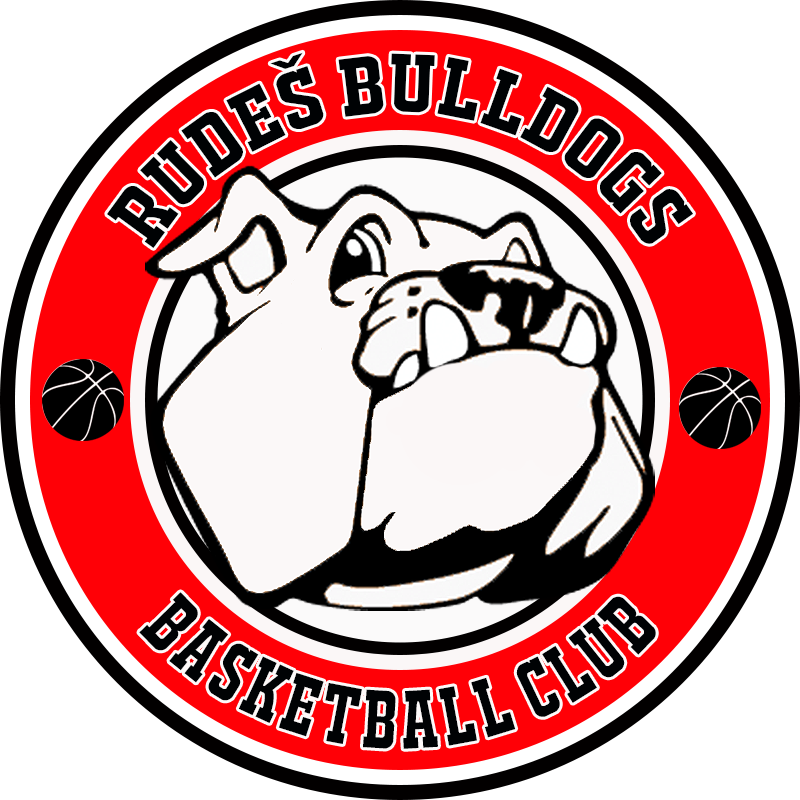
<style>
.page{position:relative;width:800px;height:800px;background:#ffffff}
.page>*{position:absolute;margin:0}
.t1{font:79.2px "JACKPORTREGULARNCV";color:#000204;scale:1.3 1}
.t2{font:79.2px "JACKPORTREGULARNCV";color:#000204}
</style>
<div class="page">
<p class="t1" style="left:107px;top:52px;width:586px;height:196px;text-align:center">RUDEŠ BULLDOGS</p>
<p class="t2" style="left:139px;top:592px;width:517px;height:157px;text-align:center">BASKETBALL CLUB</p>
</div>
